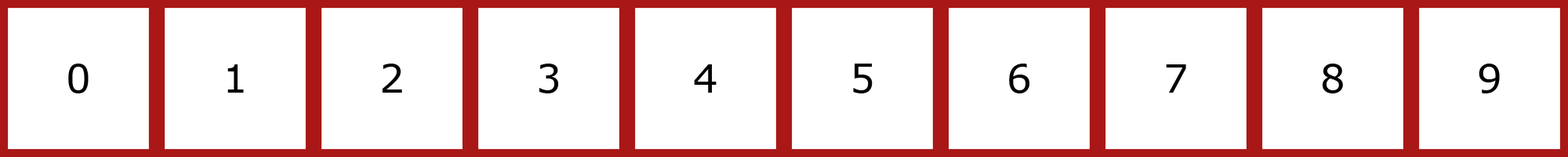
<style>
.page{position:relative;width:1568px;height:157px;background:#ffffff}
.page>*{position:absolute;margin:0}
.t1{font:39.2px "MSReferenceSansSerif";color:#000000}
</style>
<div class="page">
<p class="t1" style="left:68px;top:64px;width:21px;height:29px">0</p>
<p class="t1" style="left:227px;top:64px;width:17px;height:29px">1</p>
<p class="t1" style="left:382px;top:64px;width:20px;height:29px">2</p>
<p class="t1" style="left:539px;top:64px;width:19px;height:29px">3</p>
<p class="t1" style="left:694px;top:64px;width:23px;height:29px">4</p>
<p class="t1" style="left:853px;top:64px;width:20px;height:29px">5</p>
<p class="t1" style="left:1009px;top:64px;width:20px;height:29px">6</p>
<p class="t1" style="left:1166px;top:64px;width:20px;height:29px">7</p>
<p class="t1" style="left:1322px;top:64px;width:21px;height:29px">8</p>
<p class="t1" style="left:1479px;top:64px;width:21px;height:29px">9</p>
</div>
